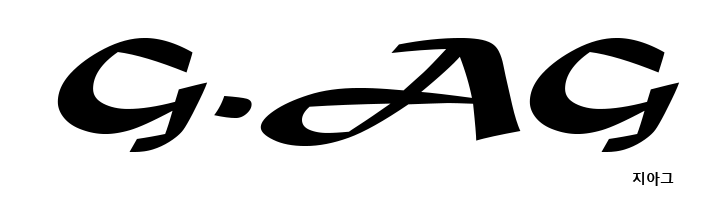
<style>
.page{position:relative;width:727px;height:200px;background:#ffffff}
.page>*{position:absolute;margin:0}
.t1{font:125.2px "MaturaMTScriptCapitals";color:#000000;scale:1.59 1}
.t2{font:14px "MalgunGothicBold";color:#000000}
</style>
<div class="page">
<p class="t1" style="left:57px;top:38px;width:623px;height:114px">G.AG</p>
<p class="t2" style="left:632px;top:172px;width:42px;height:14px">지아그</p>
</div>
